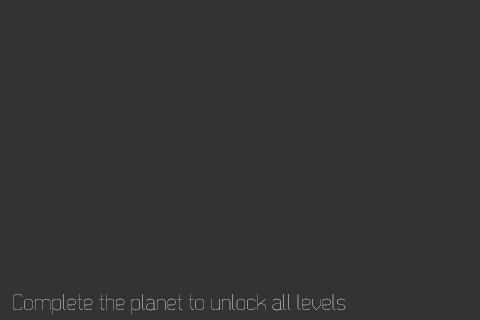
<style>
.page{position:relative;width:480px;height:320px;background:#333333}
.page>*{position:absolute;margin:0}
.t1{font:22.5px "Dekar-Light"}
</style>
<div class="page">
<p class="t1" style="left:13px;top:294px;width:333px;height:21px">Complete the planet to unlock all levels</p>
</div>
